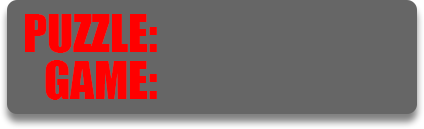
<style>
.page{position:relative;width:424px;height:129px;background:#666666}
.page>*{position:absolute;margin:0}
.t1{font:47.5px/47.5px "Impact";color:#ff0000}
</style>
<div class="page">
<p class="t1" style="left:25px;top:14px;width:132px;height:86px;text-align:right">PUZZLE:<br>GAME:</p>
</div>
